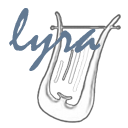
<style>
.page{position:relative;width:128px;height:128px;background:#ffffff}
.page>*{position:absolute;margin:0}
.t1{font:64.3px "Mistral";color:#627992}
</style>
<div class="page">
<p class="t1" style="left:9px;top:8px;width:92px;height:63px">lyra</p>
</div>
